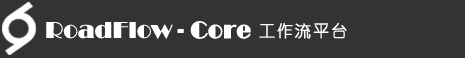
<style>
.page{position:relative;width:465px;height:58px;background:#333333}
.page>*{position:absolute;margin:0}
.t1{font:24px "Broadway";color:#feffff}
.t2{font:24px "STHupo";color:#feffff;font-weight:bold}
.t3{font:24px "Broadway";color:#feffff;font-weight:bold}
.t4{font:16px "YouYuan";letter-spacing:0.1em;color:#feffff;font-weight:bold}
</style>
<div class="page">
<p class="t1" style="left:46px;top:21px;width:205px;height:18px">RoadFlow <span class="t2">- </span><span class="t3">Core</span></p>
<p class="t4" style="left:259px;top:22px;width:88px;height:17px">工作流平台</p>
</div>
